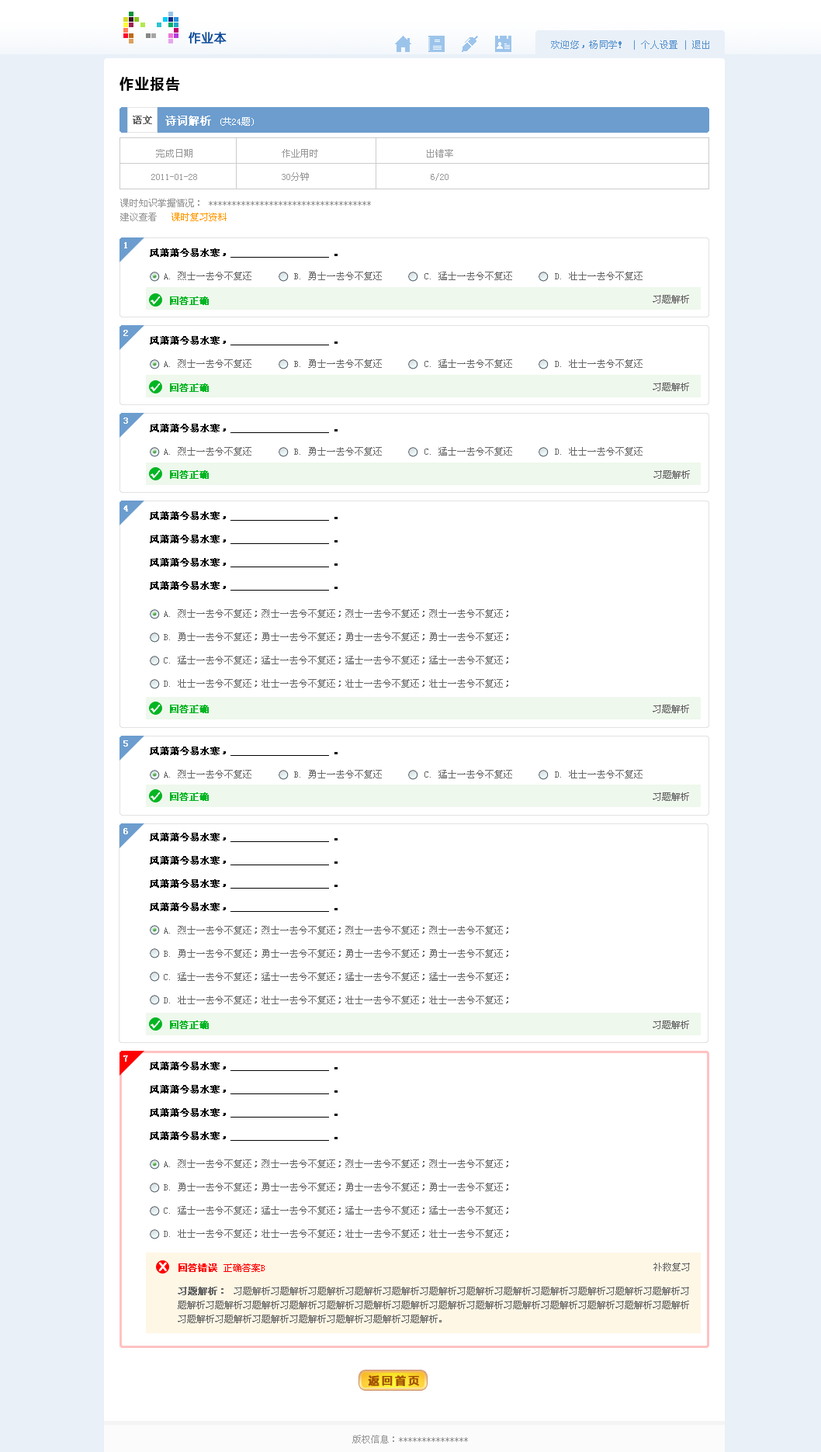
<style>
.page{position:relative;width:821px;height:1452px;background:#ffffff}
.page>*{position:absolute;margin:0}
.t1{font:12.4px "HYe3gj";color:#0a4898;font-weight:bold}
.t2{font:9.3px "SimSun";color:#5893ce}
.t3{font:9.3px "SimSun";letter-spacing:0.025em;color:#5893ce}
.t4{font:14px "MicrosoftYaHei";letter-spacing:0.1em;color:#000000}
.t5{font:9.3px "SimSun";color:#666666;font-weight:bold}
.t6{font:9.3px "SimSun";color:#ffffff}
.t7{font:9.3px "SimSun";color:#666666}
.t8{font:10.9px "SimSun";color:#ffffff;font-weight:bold}
.t9{font:9.3px/23.3px "SimSun";color:#999999}
.t10{font:9.3px/14px "SimSun";color:#999999}
.t11{font:9.3px/14px "SimSun";color:#ff9900}
.t12{font:9.3px "SimSun";color:#ffffff;font-weight:bold}
.t13{font:9.3px/23.3px "SimSun";color:#666666}
.t14{font:9.3px/23.3px "SimSun";color:#000000;font-weight:bold}
.t15{font:10.9px "HYe3gj";color:#fff7ea;font-weight:bold}
.t16{font:9.3px "SimSun";color:#01b523;font-weight:bold}
.t17{font:9.3px/27.9px "SimSun";color:#666666}
.t18{font:10.9px "HYe3gj";color:#fff7ea;font-weight:bold;scale:1.18 1}
.t19{font:9.3px/14px "SimSun";color:#666666}
.t20{font:9.3px/23.3px "SimSun";color:#ff0000;font-weight:bold}
.t21{font:9.3px/23.3px "SimSun";color:#ff0000}
.t22{font:9.3px/23.3px "SimSun";color:#666666;font-weight:bold}
.t23{font:10.9px "MicrosoftYaHei";letter-spacing:0.2em;color:#a25100;font-weight:bold}
.t24{font:9.3px "SimSun";color:#999999}
</style>
<div class="page">
<p class="t1" style="left:189px;top:32px;width:38px;height:12px">作业本</p>
<p class="t2" style="left:551px;top:40px;width:158px;height:10px"><span class="t3">欢迎您，杨同学！</span> | 个人设置 | 退出</p>
<p class="t4" style="left:120px;top:77px;width:60px;height:14px">作业报告</p>
<p class="t5" style="left:133px;top:116px;width:19px;height:8px">语文</p>
<p class="t6" style="left:165px;top:116px;width:89px;height:10px"><span class="t7">        </span><span class="t8">诗词解析 </span>(共24题)</p>
<p class="t9" style="left:151px;top:149px;width:302px;height:32px">完成日期                   作业用时                       出错率<br>    2011-01-28                  30分钟                          6/20</p>
<p class="t10" style="left:120px;top:199px;width:251px;height:22px"><span class="t9">课时知识掌握情况： </span>***********************************<br>建议查看   <span class="t11">课时复习资料</span></p>
<p class="t12" style="left:124px;top:242px;width:3px;height:6px">1</p>
<p class="t13" style="left:150px;top:248px;width:493px;height:32px"><span class="t14">      风萧萧兮易水寒，                   。<br>          </span>A. 烈士一去兮不复还         B. 勇士一去兮不复还         C. 猛士一去兮不复还         D. 壮士一去兮不复还</p>
<p class="t15" style="left:151px;top:296px;width:9px;height:8px">√</p>
<p class="t16" style="left:170px;top:296px;width:39px;height:9px">回答正确</p>
<p class="t12" style="left:123px;top:330px;width:5px;height:6px">2</p>
<p class="t13" style="left:150px;top:336px;width:493px;height:32px"><span class="t14">      风萧萧兮易水寒，                   。<br>          </span>A. 烈士一去兮不复还         B. 勇士一去兮不复还         C. 猛士一去兮不复还         D. 壮士一去兮不复还</p>
<p class="t12" style="left:123px;top:418px;width:5px;height:6px">3</p>
<p class="t13" style="left:150px;top:424px;width:493px;height:32px"><span class="t14">      风萧萧兮易水寒，                   。<br>          </span>A. 烈士一去兮不复还         B. 勇士一去兮不复还         C. 猛士一去兮不复还         D. 壮士一去兮不复还</p>
<p class="t12" style="left:123px;top:505px;width:5px;height:6px">4</p>
<p class="t13" style="left:150px;top:511px;width:358px;height:177px"><span class="t14">      风萧萧兮易水寒，                   。<br>      风萧萧兮易水寒，                   。<br>      风萧萧兮易水寒，                   。<br>      风萧萧兮易水寒，                   。<br>          </span><span class="t17">A. 烈士一</span>去兮不复还；烈士一去兮不复还；烈士一去兮不复还；烈士一去兮不复还；         <br>          B. 勇士一去兮不复还；勇士一去兮不复还；勇士一去兮不复还；勇士一去兮不复还；<br>          C. 猛士一去兮不复还；猛士一去兮不复还；猛士一去兮不复还；猛士一去兮不复还；<br>          D. 壮士一去兮不复还；壮士一去兮不复还；壮士一去兮不复还；壮士一去兮不复还；</p>
<p class="t12" style="left:123px;top:740px;width:5px;height:7px">5</p>
<p class="t13" style="left:150px;top:747px;width:493px;height:31px"><span class="t14">      风萧萧兮易水寒，                   。<br>          </span>A. 烈士一去兮不复还         B. 勇士一去兮不复还         C. 猛士一去兮不复还         D. 壮士一去兮不复还</p>
<p class="t12" style="left:123px;top:828px;width:5px;height:6px">6</p>
<p class="t13" style="left:150px;top:833px;width:358px;height:171px"><span class="t14">      风萧萧兮易水寒，                   。<br>      风萧萧兮易水寒，                   。<br>      风萧萧兮易水寒，                   。<br>      风萧萧兮易水寒，                   。<br>          </span>A. 烈士一去兮不复还；烈士一去兮不复还；烈士一去兮不复还；烈士一去兮不复还；         <br>          B. 勇士一去兮不复还；勇士一去兮不复还；勇士一去兮不复还；勇士一去兮不复还；<br>          C. 猛士一去兮不复还；猛士一去兮不复还；猛士一去兮不复还；猛士一去兮不复还；<br>          D. 壮士一去兮不复还；壮士一去兮不复还；壮士一去兮不复还；壮士一去兮不复还；</p>
<p class="t12" style="left:123px;top:1056px;width:5px;height:6px">7</p>
<p class="t13" style="left:150px;top:1062px;width:358px;height:176px"><span class="t14">      风萧萧兮易水寒，                   。<br>      风萧萧兮易水寒，                   。<br>      风萧萧兮易水寒，                   。<br>      风萧萧兮易水寒，                   。<br>          </span><span class="t17">A. 烈士一</span>去兮不复还；烈士一去兮不复还；烈士一去兮不复还；烈士一去兮不复还；         <br>          B. 勇士一去兮不复还；勇士一去兮不复还；勇士一去兮不复还；勇士一去兮不复还；<br>          C. 猛士一去兮不复还；猛士一去兮不复还；猛士一去兮不复还；猛士一去兮不复还；<br>          D. 壮士一去兮不复还；壮士一去兮不复还；壮士一去兮不复还；壮士一去兮不复还；</p>
<p class="t18" style="left:159px;top:1263px;width:8px;height:8px">X</p>
<p class="t19" style="left:178px;top:1264px;width:511px;height:59px"><span class="t20">回答错误 </span><span class="t21">正确答案B  <br></span><span class="t22">习题解析： </span>习题解析习题解析习题解析习题解析习题解析习题解析习题解析习题解析习题解析习题解析习题解析习题解析习<br>题解析习题解析习题解析习题解析习题解析习题解析习题解析习题解析习题解析习题解析习题解析习题解析习题解析习题解析<br>习题解析习题解析习题解析习题解析习题解析习题解析习题解析。</p>
<p class="t7" style="left:654px;top:1263px;width:36px;height:8px">补救复习</p>
<p class="t23" style="left:368px;top:1375px;width:52px;height:11px">返回首页</p>
<p class="t24" style="left:352px;top:1435px;width:116px;height:9px">版权信息：***************</p>
</div>
